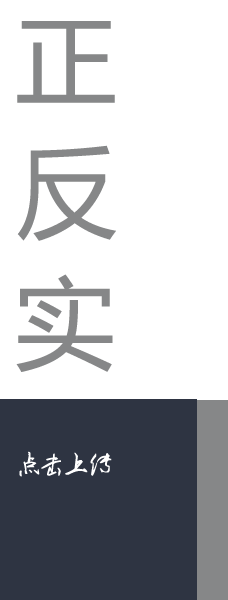
<style>
.page{position:relative;width:228px;height:600px;background:#ffffff}
.page>*{position:absolute;margin:0}
.t1{font:100px "MicrosoftYaHei";color:#868788}
.t2{font:24px "Ò¶¸ùÓÑ¸Ö±ÊÐÐÊéÉý¼¶°æ";letter-spacing:-0.01em;color:#ffffff}
</style>
<div class="page">
<p class="t1" style="left:17px;top:21px;width:98px;height:82px">正</p>
<p class="t1" style="left:17px;top:145px;width:99px;height:96px">反</p>
<p class="t1" style="left:16px;top:274px;width:97px;height:98px">实</p>
<p class="t2" style="left:19px;top:451px;width:93px;height:26px">点击上传</p>
</div>
